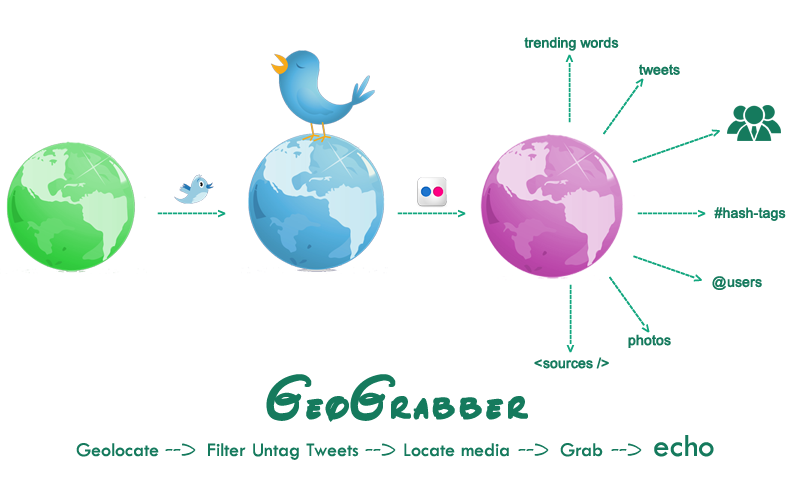
<style>
.page{position:relative;width:800px;height:500px;background:#ffffff}
.page>*{position:absolute;margin:0}
.t1{font:14px "ArialMT";color:#157a5d;font-weight:bold}
.t2{font:14px "ArialMT";color:#11a67e;font-weight:bold}
.t3{font:60px "WDScript";color:#157a5d;font-weight:bold}
.t4{font:20px "TwCenMT-Regular";color:#157a5d}
.t5{font:20px "WDScript";color:#157a5d}
.t6{font:33px "TwCenMT-Regular";color:#157a5d}
</style>
<div class="page">
<p class="t1" style="left:524px;top:37px;width:95px;height:14px">trending words</p>
<p class="t2" style="left:565px;top:54px;width:9px;height:8px;rotate:-90deg">&gt;</p>
<p class="t2" style="left:568px;top:63px;width:3px;height:60px;rotate:-90deg">------------</p>
<p class="t1" style="left:639px;top:64px;width:41px;height:11px">tweets</p>
<p class="t2" style="left:635px;top:78px;width:9px;height:9px;rotate:-54deg">&gt;</p>
<p class="t2" style="left:603px;top:85px;width:36px;height:50px;rotate:-54deg">------------</p>
<p class="t2" style="left:632px;top:133px;width:81px;height:30px;rotate:-19deg">-----------------</p>
<p class="t2" style="left:711px;top:129px;width:9px;height:8px;rotate:-19deg">&gt;</p>
<p class="t2" style="left:218px;top:209px;width:8px;height:9px">&gt;</p>
<p class="t2" style="left:458px;top:209px;width:8px;height:9px">&gt;</p>
<p class="t2" style="left:698px;top:209px;width:8px;height:9px">&gt;</p>
<p class="t1" style="left:714px;top:207px;width:72px;height:14px">#hash-tags</p>
<p class="t2" style="left:157px;top:212px;width:60px;height:3px">------------</p>
<p class="t2" style="left:397px;top:212px;width:60px;height:3px">------------</p>
<p class="t2" style="left:637px;top:212px;width:60px;height:3px">------------</p>
<p class="t2" style="left:633px;top:255px;width:62px;height:24px;rotate:19deg">-------------</p>
<p class="t2" style="left:609px;top:276px;width:36px;height:50px;rotate:54deg">------------</p>
<p class="t2" style="left:693px;top:274px;width:9px;height:8px;rotate:19deg">&gt;</p>
<p class="t1" style="left:712px;top:276px;width:50px;height:14px">@users</p>
<p class="t2" style="left:569px;top:284px;width:3px;height:60px;rotate:90deg">------------</p>
<p class="t2" style="left:641px;top:324px;width:9px;height:9px;rotate:54deg">&gt;</p>
<p class="t1" style="left:628px;top:334px;width:43px;height:14px">photos</p>
<p class="t2" style="left:566px;top:345px;width:9px;height:8px;rotate:90deg">&gt;</p>
<p class="t1" style="left:534px;top:357px;width:75px;height:12px">&lt;sources /&gt;</p>
<p class="t3" style="left:266px;top:374px;width:262px;height:48px">GeoGrabber</p>
<p class="t4" style="left:76px;top:435px;width:638px;height:25px">Geolocate <span class="t5">--&gt; </span>Filter Untag Tweets <span class="t5">--&gt;</span> Locate media <span class="t5">--&gt; </span>Grab <span class="t5">--&gt; </span><span class="t6">echo</span></p>
</div>
